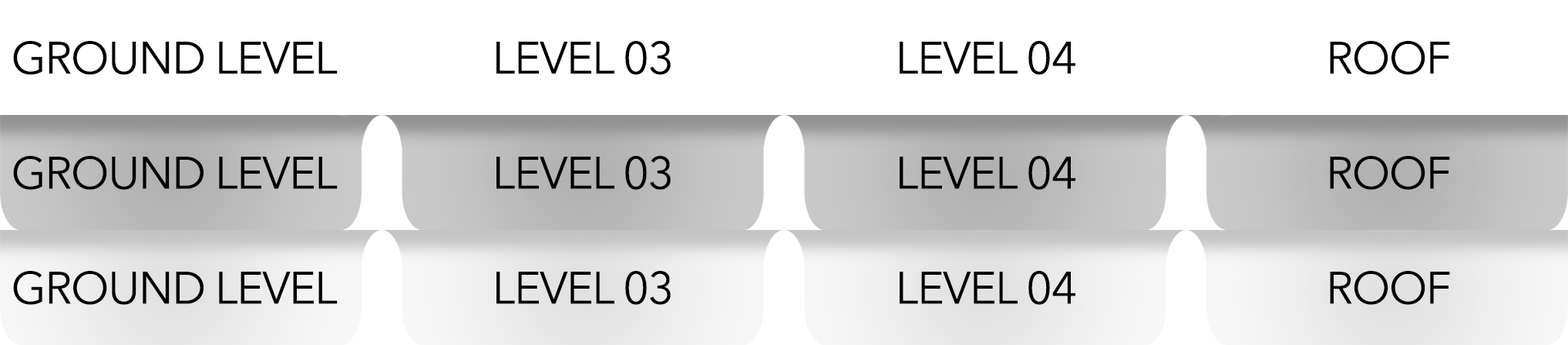
<style>
.page{position:relative;width:1568px;height:345px;background:#ffffff}
.page>*{position:absolute;margin:0}
.t1{font:45px "AvenirNextLTPro-Regular";letter-spacing:-0.025em;color:#000000;text-transform:uppercase}
</style>
<div class="page">
<p class="t1" style="left:13px;top:41px;width:325px;height:34px">ground level</p>
<p class="t1" style="left:496px;top:41px;width:175px;height:34px">level 03</p>
<p class="t1" style="left:900px;top:41px;width:175px;height:34px">level 04</p>
<p class="t1" style="left:1330px;top:41px;width:120px;height:34px">roof</p>
<p class="t1" style="left:13px;top:156px;width:325px;height:34px">ground level</p>
<p class="t1" style="left:496px;top:156px;width:175px;height:34px">level 03</p>
<p class="t1" style="left:900px;top:156px;width:175px;height:34px">level 04</p>
<p class="t1" style="left:1330px;top:156px;width:120px;height:34px">roof</p>
<p class="t1" style="left:13px;top:271px;width:325px;height:34px">ground level</p>
<p class="t1" style="left:496px;top:271px;width:175px;height:34px">level 03</p>
<p class="t1" style="left:900px;top:271px;width:175px;height:34px">level 04</p>
<p class="t1" style="left:1330px;top:271px;width:120px;height:34px">roof</p>
</div>
